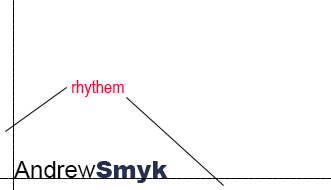
<style>
.page{position:relative;width:331px;height:190px;background:#ffffff}
.page>*{position:absolute;margin:0}
.t1{font:18px "ArialNarrow";color:#fe0036}
.t2{font:24px "ArialMT";color:#060606}
.t3{font:24px "Arial-Black";color:#262f4e}
</style>
<div class="page">
<p class="t1" style="left:72px;top:80px;width:52px;height:17px">rhythem</p>
<p class="t2" style="left:14px;top:161px;width:154px;height:22px">Andrew<span class="t3">Smyk</span></p>
</div>
